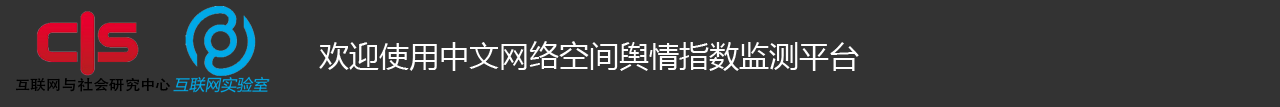
<style>
.page{position:relative;width:1280px;height:107px;background:#333333}
.page>*{position:absolute;margin:0}
.t1{font:30px "MicrosoftYaHei";color:#ffffff}
.t2{font:14px "AdobeHeitiStd-Regular";color:#000000;scale:1.12 1}
</style>
<div class="page">
<p class="t1" style="left:319px;top:41px;width:540px;height:30px">欢迎使用中文网络空间舆情指数监测平台</p>
<p class="t2" style="left:16px;top:78px;width:155px;height:14px">互联网与社会研究中心</p>
</div>
